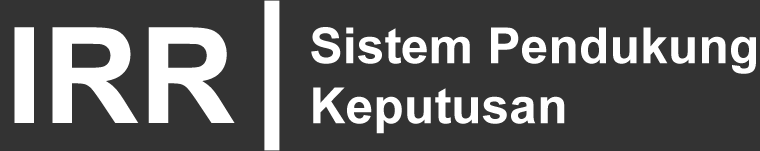
<style>
.page{position:relative;width:760px;height:151px;background:#333333}
.page>*{position:absolute;margin:0}
.t1{font:133.3px "Arial-BoldMT";color:#ffffff}
.t2{font:50px "Arial-BoldMT";color:#ffffff}
</style>
<div class="page">
<p class="t1" style="left:14px;top:27px;width:221px;height:96px">IRR</p>
<p class="t2" style="left:311px;top:27px;width:445px;height:107px">Sistem Pendukung<br>Keputusan</p>
</div>
